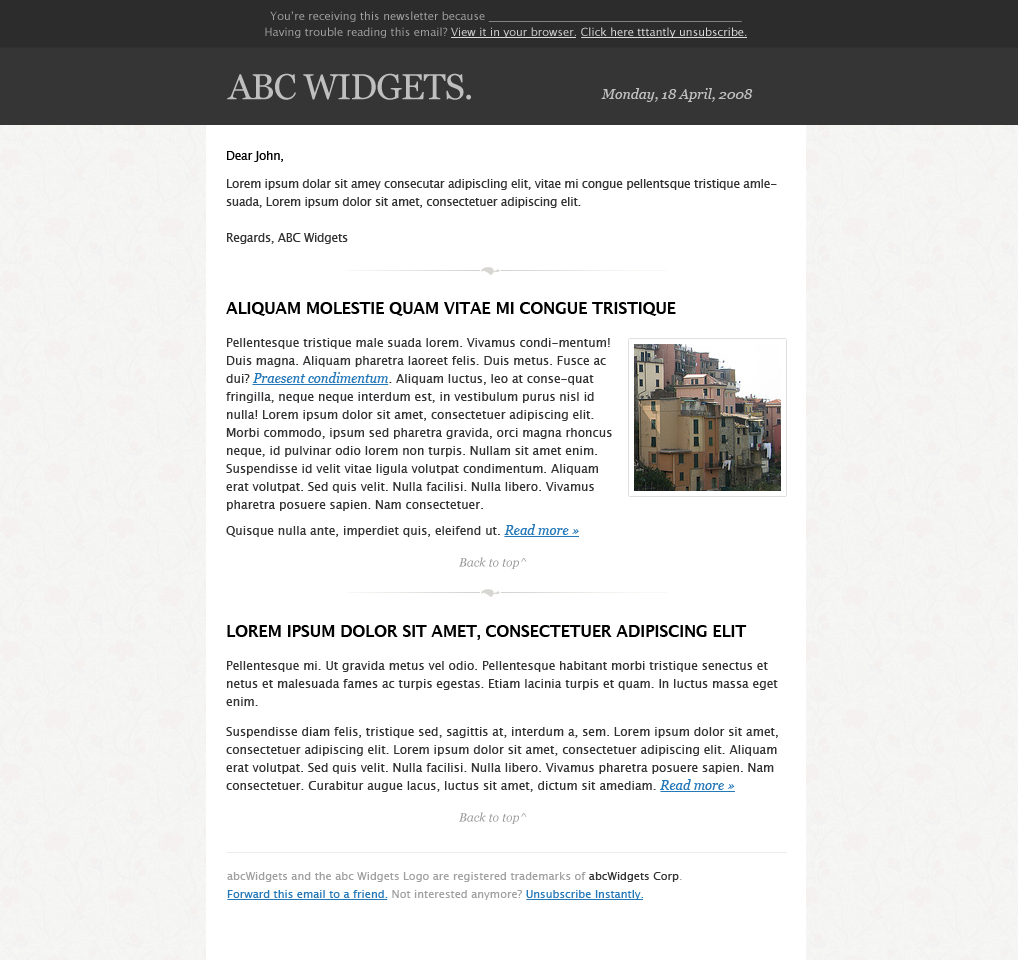
<style>
.page{position:relative;width:1018px;height:960px;background:#ffffff}
.page>*{position:absolute;margin:0}
.t1{font:11px/16px "LucidaGrande";color:#a1a1a1}
.t2{font:11px/16px "LucidaGrande";color:#d0cfcf}
.t3{font:11px/16px "LucidaGrande";color:#dbdbdb}
.t4{font:36px "Georgia";letter-spacing:-0.03em;color:#bfbfbf;text-transform:uppercase}
.t5{font:14px "Georgia-Italic";color:#bfbfbf}
.t6{font:12px/18px "LucidaGrande";letter-spacing:-0.025em;color:#333333}
.t7{font:12px/18px "LucidaGrande";letter-spacing:-0.025em;color:#000000}
.t8{font:16px/10px "LucidaGrande-Bold";letter-spacing:-0.025em;color:#000000}
.t9{font:12px/18px "LucidaGrande";color:#333333}
.t10{font:16px/20px "LucidaGrande-Bold";letter-spacing:-0.025em;color:#000000;text-transform:uppercase}
.t11{font:13px/18px "Georgia-Italic";color:#2679b9}
.t12{font:12px "Georgia-Italic";color:#999999}
.t13{font:11px/18px "LucidaGrande";color:#a1a1a1}
.t14{font:11px/18px "LucidaGrande";color:#333333}
.t15{font:11px/18px "LucidaGrande";color:#2679b9}
</style>
<div class="page">
<p class="t1" style="left:265px;top:11px;width:482px;height:27px;text-align:center">You’re receiving this newsletter because ______________________________________________<br>Having trouble reading this email? <span class="t2">View it in your browser</span>. <span class="t3">Click here tttantly unsubscribe</span>.</p>
<p class="t4" style="left:227px;top:73px;width:244px;height:27px">ABC Widgets.</p>
<p class="t5" style="left:601px;top:88px;width:152px;height:14px">Monday, 18 April, 2008</p>
<p class="t6" style="left:226px;top:151px;width:551px;height:93px"><span class="t7">Dear John,<br></span><span class="t8"><br></span>Lorem ipsum dolar sit amey consecutar adipiscling elit, vitae mi congue pellentsque tristique amlesuada, Lorem ipsum dolor sit amet, consectetuer adipiscing elit.<br><br>Regards, ABC Widgets</p>
<p class="t9" style="left:226px;top:302px;width:450px;height:235px"><span class="t10">Aliquam molestie quam vitae mi congue tristique</span><br>Pellentesque tristique male suada lorem. Vivamus condi-mentum! <br>Duis magna. Aliquam pharetra laoreet felis. Duis metus. Fusce ac <br>dui? <span class="t11">Praesent condimentum</span>. Aliquam luctus, leo at conse-quat <br>fringilla, neque neque interdum est, in vestibulum purus nisl id <br>nulla! Lorem ipsum dolor sit amet, consectetuer adipiscing elit. <br>Morbi commodo, ipsum sed pharetra gravida, orci magna rhoncus <br>neque, id pulvinar odio lorem non turpis. Nullam sit amet enim. <br>Suspendisse id velit vitae ligula volutpat condimentum. Aliquam <br>erat volutpat. Sed quis velit. Nulla facilisi. Nulla libero. Vivamus <br>pharetra posuere sapien. Nam consectetuer.<br>Quisque nulla ante, imperdiet quis, eleifend ut. <span class="t11">Read more »</span></p>
<p class="t12" style="left:459px;top:557px;width:68px;height:12px">Back to top^</p>
<p class="t9" style="left:226px;top:625px;width:552px;height:167px"><span class="t10">Lorem ipsum dolor sit amet, consectetuer adipiscing elit<br></span>Pellentesque mi. Ut gravida metus vel odio. Pellentesque habitant morbi tristique senectus et netus et malesuada fames ac turpis egestas. Etiam lacinia turpis et quam. In luctus massa eget enim.<br>Suspendisse diam felis, tristique sed, sagittis at, interdum a, sem. Lorem ipsum dolor sit amet, consectetuer adipiscing elit. Lorem ipsum dolor sit amet, consectetuer adipiscing elit. Aliquam erat volutpat. Sed quis velit. Nulla facilisi. Nulla libero. Vivamus pharetra posuere sapien. Nam consectetuer. Curabitur augue lacus, luctus sit amet, dictum sit amediam. <span class="t11">Read more »</span></p>
<p class="t12" style="left:459px;top:812px;width:68px;height:12px">Back to top^</p>
<p class="t13" style="left:227px;top:872px;width:455px;height:28px">abcWidgets and the abc Widgets Logo are registered trademarks of <span class="t14">abcWidgets Corp</span>.<br><span class="t15">Forward this email to a friend.</span> Not interested anymore? <span class="t15">Unsubscribe Instantly.</span></p>
</div>
